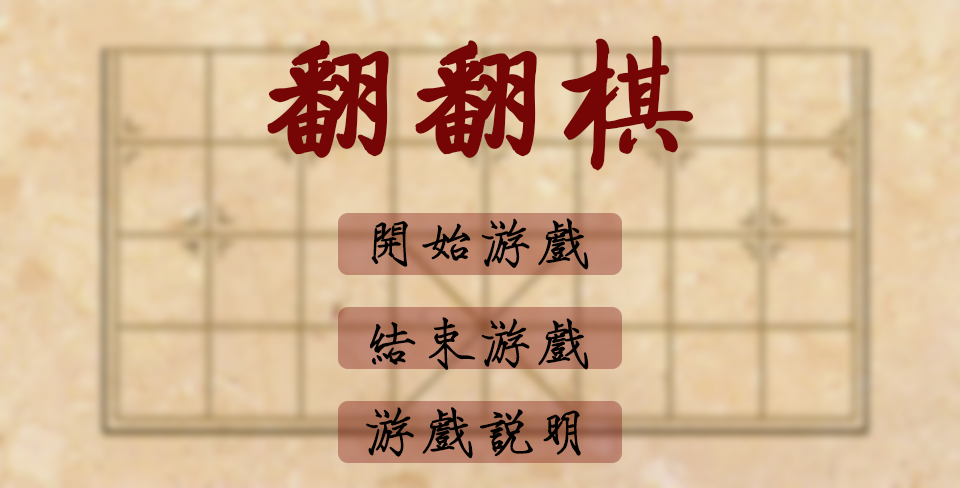
<style>
.page{position:relative;width:960px;height:488px}
.page>*{position:absolute;margin:0}
.t1{font:144px "FZQTJW--GB1-0";color:#760606;font-weight:bold}
.t2{font:56.3px "HYi3gf";color:#000000;font-weight:bold}
</style>
<div class="page">
<p class="t1" style="left:267px;top:35px;width:427px;height:136px">翻翻棋</p>
<p class="t2" style="left:371px;top:218px;width:218px;height:52px">开始游戏</p>
<p class="t2" style="left:370px;top:317px;width:219px;height:53px">结束游戏</p>
<p class="t2" style="left:366px;top:407px;width:215px;height:52px">游戏说明</p>
</div>
